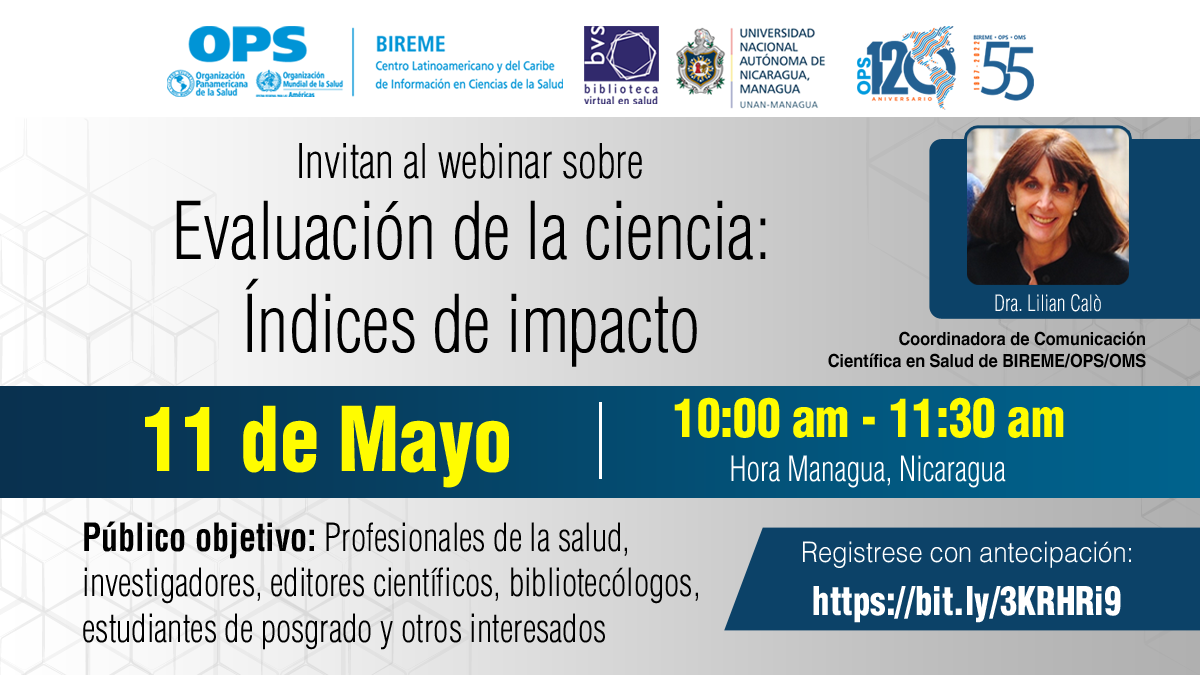
<style>
.page{position:relative;width:1200px;height:675px}
.page>*{position:absolute;margin:0}
.t1{font:46.6px "Helvetica-CondensedLight";color:#000000;scale:0.9 1}
.t2{font:77.7px "Helvetica-CondensedLight";color:#000000;scale:0.9 1}
.t3{font:22px "Helvetica-CondensedLight";color:#ffffff;scale:0.9 1}
.t4{font:18px "HelveticaWorld-Bold";color:#000000;scale:0.9 1}
.t5{font:52.2px "Helvetica-CondensedBlack";color:#fffc00;scale:0.9 1}
.t6{font:87.1px "Helvetica-CondensedBlack";color:#fffc00;scale:0.9 1}
.t7{font:33.9px "Helvetica-CondensedLight";color:#ffffff;scale:0.9 1}
.t8{font:38px "Helvetica-CondensedLight";color:#000000;scale:0.9 1}
.t9{font:38px "Helvetica-CondensedBold";color:#000000;scale:0.9 1}
.t10{font:28.3px "Helvetica-Light";color:#ffffff;scale:0.9 1}
.t11{font:38.6px "Helvetica-CondensedBlack";color:#ffffff;scale:0.9 1}
</style>
<div class="page">
<p class="t1" style="left:299px;top:143px;width:343px;height:36px">Invitan al webinar sobre</p>
<p class="t2" style="left:176px;top:200px;width:590px;height:167px;text-align:center">Evaluación de la ciencia:<br>Índices de impacto</p>
<p class="t3" style="left:995px;top:294px;width:106px;height:18px">Dra. Lilian Calò</p>
<p class="t4" style="left:828px;top:331px;width:318px;height:37px;text-align:right">Coordinadora de Comunicación<br> Científica en Salud de BIREME/OPS/OMS</p>
<p class="t5" style="left:674px;top:397px;width:390px;height:41px">10:00 am - 11:30 am</p>
<p class="t6" style="left:145px;top:405px;width:364px;height:83px">11 de Mayo</p>
<p class="t7" style="left:731px;top:455px;width:275px;height:33px">Hora Managua, Nicaragua</p>
<p class="t8" style="left:83px;top:521px;width:615px;height:129px"><span class="t9">Público objetivo:</span> Profesionales de la salud, investigadores, editores científicos, bibliotecólogos, estudiantes de posgrado y otros interesados</p>
<p class="t10" style="left:803px;top:541px;width:328px;height:27px">Registrese con antecipación:</p>
<p class="t11" style="left:813px;top:586px;width:308px;height:37px">https://bit.ly/3KRHRi9</p>
</div>
